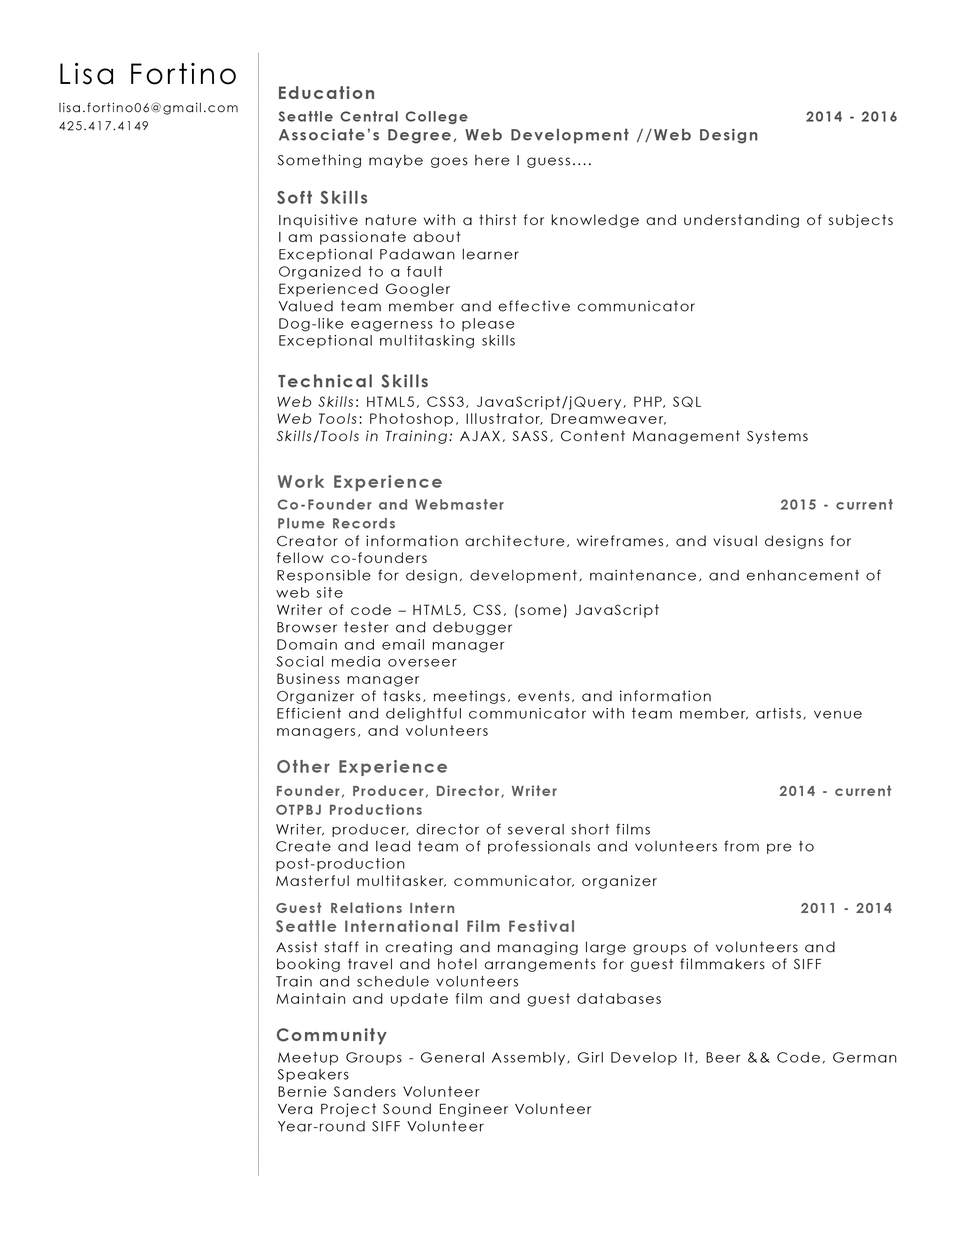
<style>
.page{position:relative;width:960px;height:1242px;background:#ffffff}
.page>*{position:absolute;margin:0}
.t1{font:28.2px "CenturyGothic";letter-spacing:0.1em;color:#020202}
.t2{font:17.3px "CenturyGothic-Bold";letter-spacing:0.1em;color:#585656}
.t3{font:12.5px/9px "CenturyGothic";letter-spacing:0.1em;color:#020202}
.t4{font:14.1px/18.8px "CenturyGothic-Bold";letter-spacing:0.1em;color:#585656}
.t5{font:15.7px/18.8px "CenturyGothic-Bold";letter-spacing:0.1em;color:#585656}
.t6{font:14.1px "CenturyGothic";letter-spacing:0.1em;color:#020202}
.t7{font:17.3px "CenturyGothic-Bold";letter-spacing:0.1em;color:#5b5959}
.t8{font:14.1px/17.3px "CenturyGothic";letter-spacing:0.1em;color:#020202}
.t9{font:14.1px/17.3px "CenturyGothic-Italic";letter-spacing:0.1em;color:#020202}
.t10{font:17.3px "CenturyGothic-Bold";letter-spacing:0.1em;color:#656464}
.t11{font:14.1px/18.8px "CenturyGothic-Bold";letter-spacing:0.1em;color:#656464}
.t12{font:15.7px/18.8px "CenturyGothic-Bold";letter-spacing:0.1em;color:#656464}
</style>
<div class="page">
<p class="t1" style="left:60px;top:63px;width:176px;height:21px">Lisa Fortino</p>
<p class="t2" style="left:279px;top:86px;width:95px;height:13px">Education</p>
<p class="t3" style="left:59px;top:103px;width:179px;height:27px">lisa.fortino06@gmail.com<br><br>425.417.4149</p>
<p class="t4" style="left:278px;top:111px;width:619px;height:32px">Seattle Central College                               2014 - 2016<br><span class="t5">Associate’s Degree, Web Development //Web Design</span></p>
<p class="t6" style="left:277px;top:155px;width:314px;height:13px">Something maybe goes here I guess....</p>
<p class="t7" style="left:277px;top:191px;width:90px;height:13px">Soft Skills</p>
<p class="t8" style="left:279px;top:215px;width:614px;height:133px">Inquisitive nature with a thirst for knowledge and understanding of subjects I am passionate about<br>Exceptional Padawan learner<br>Organized to a fault<br>Experienced Googler<br>Valued team member and effective communicator  <br>Dog-like eagerness to please<br>Exceptional multitasking skills</p>
<p class="t2" style="left:278px;top:375px;width:150px;height:13px">Technical Skills</p>
<p class="t8" style="left:277px;top:396px;width:531px;height:48px"><span class="t9">Web Skills</span>: HTML5, CSS3, JavaScript/jQuery, PHP, SQL<br><span class="t9">Web Tools</span>: Photoshop, Illustrator, Dreamweaver,<br><span class="t9">Skills/Tools in Training:</span> AJAX, SASS, Content Management Systems</p>
<p class="t10" style="left:277px;top:475px;width:165px;height:16px">Work Experience</p>
<p class="t11" style="left:277px;top:499px;width:616px;height:30px">Co-Founder and Webmaster                                 2015 - current<br>Plume Records</p>
<p class="t8" style="left:276px;top:536px;width:605px;height:203px">Creator of information architecture, wireframes, and visual designs for fellow co-founders<br>Responsible for design, development, maintenance, and enhancement of web site<br>Writer of code – HTML5, CSS, (some) JavaScript<br>Browser tester and debugger<br>Domain and email manager<br>Social media overseer<br>Business manager<br>Organizer of tasks, meetings, events, and information<br>Efficient and delightful communicator with team member, artists, venue managers, and volunteers</p>
<p class="t10" style="left:277px;top:760px;width:170px;height:16px">Other Experience</p>
<p class="t11" style="left:276px;top:786px;width:615px;height:29px">Founder, Producer, Director, Writer                      2014 - current OTPBJ Productions</p>
<p class="t8" style="left:276px;top:824px;width:537px;height:65px">Writer, producer, director of several short films<br>Create and lead team of professionals and volunteers from pre to post-production<br>Masterful multitasker, communicator, organizer</p>
<p class="t11" style="left:276px;top:903px;width:616px;height:29px">Guest Relations Intern                                 2011 - 2014<br><span class="t12">Seattle International Film Festival</span></p>
<p class="t8" style="left:276px;top:942px;width:559px;height:65px">Assist staff in creating and managing large groups of volunteers and booking travel and hotel arrangements for guest filmmakers of SIFF<br>Train and schedule volunteers <br>Maintain and update film and guest databases</p>
<p class="t7" style="left:277px;top:1028px;width:110px;height:17px">Community</p>
<p class="t8" style="left:277px;top:1052px;width:619px;height:80px">Meetup Groups - General Assembly, Girl Develop It, Beer &amp;&amp; Code, German Speakers<br>Bernie Sanders Volunteer<br>Vera Project Sound Engineer Volunteer<br>Year-round SIFF Volunteer</p>
</div>
